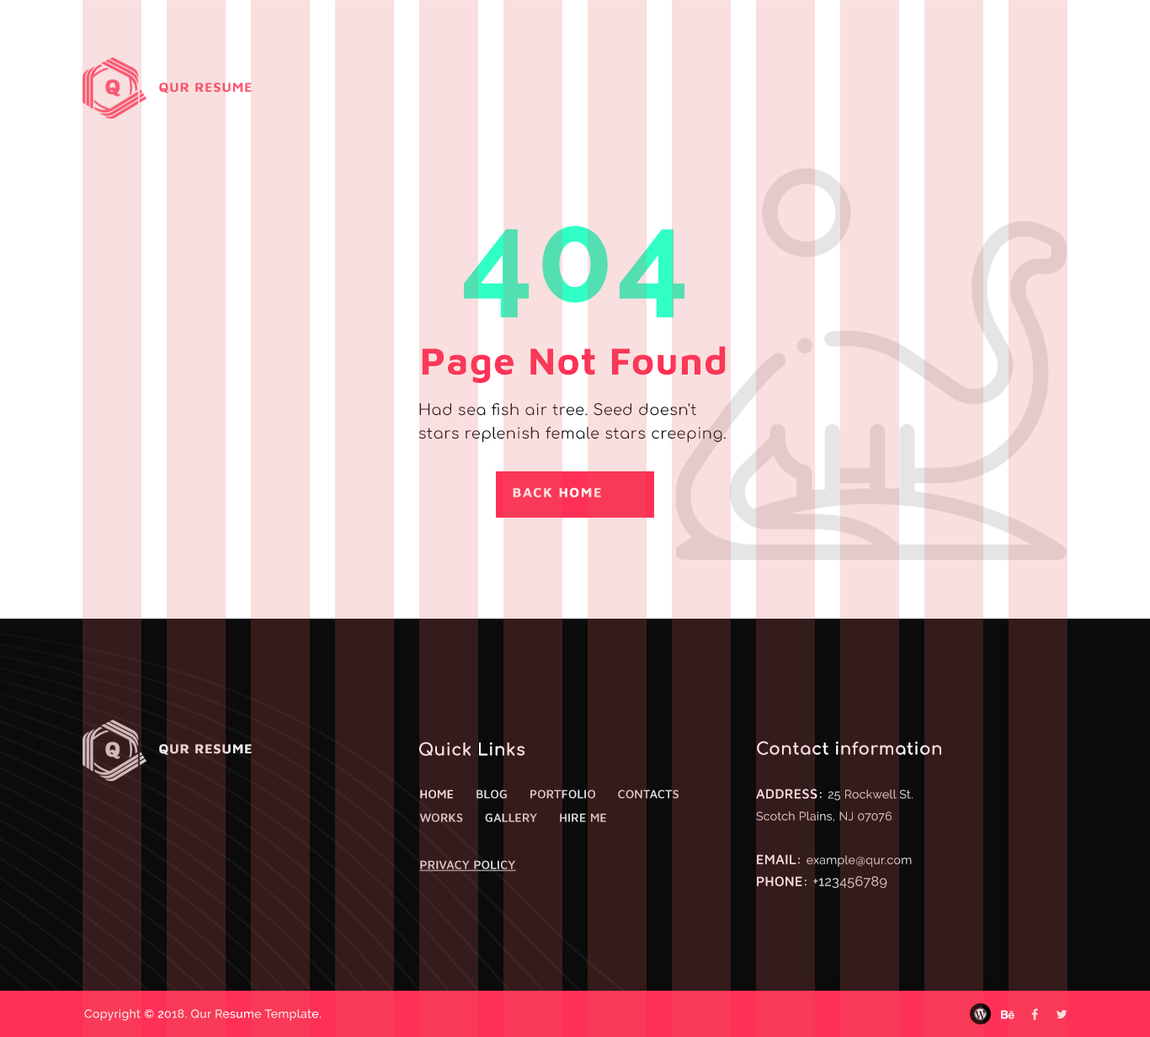
<style>
.page{position:relative;width:1150px;height:1037px;background:#f9dfdf}
.page>*{position:absolute;margin:0}
.t1{font:13.5px "MavenPro-Bold";letter-spacing:0.05em;color:#f9526a}
.t2{font:126.3px "Raleway-Bold";letter-spacing:0.025em}
.t3{font:38.7px "MavenPro-Bold";letter-spacing:0.025em;color:#ff3057}
.t4{font:15.2px/23.6px "Comfortaa-Regular";letter-spacing:0.025em;color:#351c1c}
.t5{font:13.5px "MavenPro-Bold";letter-spacing:0.1em;color:#f9dfdf;text-transform:uppercase}
.t6{font:13.5px "MavenPro-Bold";letter-spacing:0.05em}
.t7{font:16.8px "Comfortaa-Bold";letter-spacing:0.025em;color:#f9dfdf}
.t8{font:11.8px/23.6px "MavenPro-Medium";letter-spacing:0.025em;text-transform:uppercase}
.t9{font:11.8px/23.6px "MavenPro-Medium";letter-spacing:0.025em;text-transform:uppercase;text-decoration:underline}
.t10{font:11.8px/21.9px "Raleway-Regular";letter-spacing:0.025em;color:#f9dfdf}
.t11{font:13.5px/21.9px "MavenPro-Medium";letter-spacing:0.025em;color:#f9dfdf}
.t12{font:13.5px/21.9px "Raleway-Regular";letter-spacing:0.025em;color:#f9dfdf}
.t13{font:11.8px "Raleway-Medium";letter-spacing:0.025em;color:#f9dfdf}
</style>
<div class="page">
<p class="t1" style="left:159px;top:82px;width:93px;height:11px">QUR RESUME</p>
<p class="t2" style="left:464px;top:226px;width:221px;height:92px">404</p>
<p class="t3" style="left:422px;top:346px;width:304px;height:37px">Page Not Found</p>
<p class="t4" style="left:418px;top:402px;width:308px;height:41px">Had sea fish air tree. Seed doesn't stars replenish female stars creeping. Isn't bring great also fifth fly fill land.</p>
<p class="t5" style="left:513px;top:487px;width:88px;height:10px">back home</p>
<p class="t6" style="left:159px;top:744px;width:93px;height:11px">QUR RESUME</p>
<p class="t7" style="left:419px;top:742px;width:105px;height:14px">Quick Links</p>
<p class="t7" style="left:757px;top:741px;width:184px;height:14px">Contact information</p>
<p class="t8" style="left:419px;top:790px;width:259px;height:81px">home      blog      portfolio      contacts     <br>works      gallery      hire me<br><br><span class="t9">privacy policy</span></p>
<p class="t10" style="left:756px;top:789px;width:156px;height:99px"><span class="t11">ADDRESS: </span>25 Rockwell St. <br>Scotch Plains, NJ 07076<br><br><span class="t11">EMAIL: </span>example@qur.com<br><span class="t11">PHONE: </span><span class="t12">+123456789</span></p>
<p class="t13" style="left:84px;top:1009px;width:237px;height:12px">Copyright © 2018. Qur Resume Template.</p>
</div>
